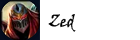
<style>
.page{position:relative;width:140px;height:40px;background:#ffffff}
.page>*{position:absolute;margin:0}
.t1{font:16px "VinerHandITC";color:#000000}
</style>
<div class="page">
<p class="t1" style="left:48px;top:14px;width:28px;height:18px">Zed</p>
</div>
